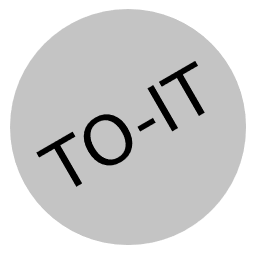
<style>
.page{position:relative;width:256px;height:256px;background:#c4c4c4}
.page>*{position:absolute;margin:0}
.t1{font:68px "DejaVuSans";color:#000000}
</style>
<div class="page">
<p class="t1" style="left:36px;top:60px;width:169px;height:127px;rotate:-30deg">TO-IT</p>
</div>
